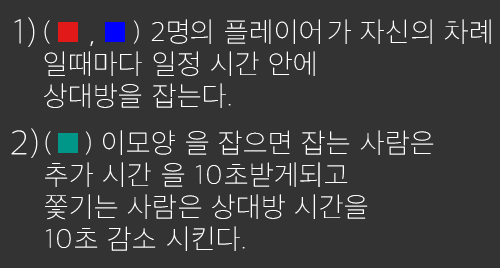
<style>
.page{position:relative;width:500px;height:268px;background:#333333}
.page>*{position:absolute;margin:0}
.t1{font:36px "AppleSDGothicNeo-Thin";letter-spacing:0.03em;color:#ffffff}
.t2{font:28px/32px "AppleSDGothicNeo-Thin";letter-spacing:0.03em;color:#ffffff}
</style>
<div class="page">
<p class="t1" style="left:14px;top:17px;width:21px;height:30px">1)</p>
<p class="t2" style="left:44px;top:19px;width:447px;height:89px">(          ) 2명의 플레이어 가 자신의 차례<br>일때마다 일정 시간 안에<br>상대방을 잡는다.</p>
<p class="t1" style="left:90px;top:41px;width:4px;height:5px">,</p>
<p class="t1" style="left:11px;top:128px;width:27px;height:30px">2)</p>
<p class="t2" style="left:45px;top:130px;width:389px;height:121px">(    ) 이모양 을 잡으면 잡는 사람은 <br>추가 시간 을 10초받게되고<br>쫓기는 사람은 상대방 시간을 <br>10초 감소 시킨다.</p>
</div>
